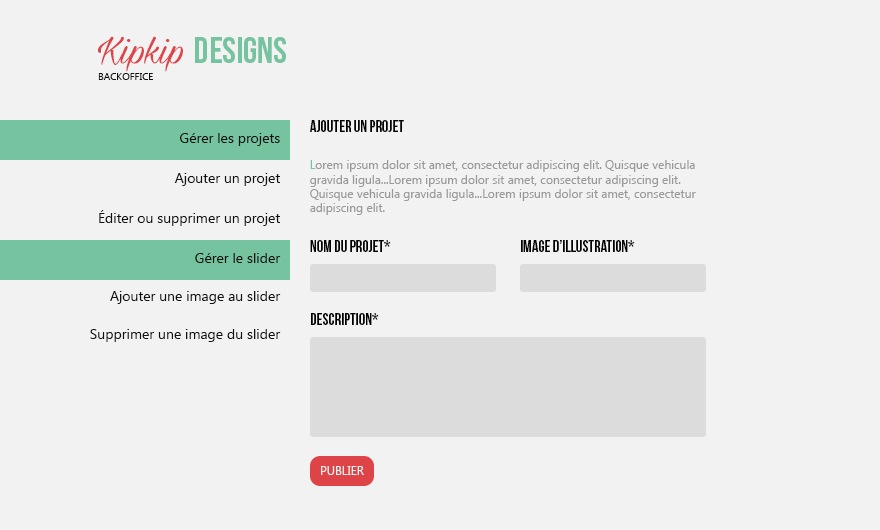
<style>
.page{position:relative;width:880px;height:530px;background:#f2f2f2}
.page>*{position:absolute;margin:0}
.t1{font:10px/17px "SegoeUI";color:#111111}
.t2{font:44px/17px "MilasianCircaPERSONAL";color:#de4347}
.t3{font:37px/17px "BebasNeue";color:#76c39f}
.t4{font:16px "BebasNeue";color:#000000}
.t5{font:14px "SegoeUI";color:#111111}
.t6{font:12px "SegoeUI";color:#999999}
.t7{font:12px "SegoeUI";color:#76c39f}
.t8{font:12px "SegoeUI";color:#f2f2f2}
</style>
<div class="page">
<p class="t1" style="left:98px;top:36px;width:188px;height:44px"><span class="t2">Kipkip </span><span class="t3">DESIGNS<br></span>BACKOFFICE</p>
<p class="t4" style="left:310px;top:120px;width:94px;height:12px">AJOUTER UN PROJET</p>
<p class="t5" style="left:180px;top:133px;width:100px;height:13px">Gérer les projets</p>
<p class="t6" style="left:310px;top:160px;width:386px;height:55px"><span class="t7">L</span>orem ipsum dolor sit amet, consectetur adipiscing elit. Quisque vehicula gravida ligula...Lorem ipsum dolor sit amet, consectetur adipiscing elit. Quisque vehicula gravida ligula...Lorem ipsum dolor sit amet, consectetur adipiscing elit.</p>
<p class="t5" style="left:174px;top:173px;width:106px;height:13px">Ajouter un projet</p>
<p class="t5" style="left:99px;top:210px;width:181px;height:16px">Éditer ou supprimer un projet</p>
<p class="t4" style="left:310px;top:240px;width:81px;height:12px">NOM DU PROJET*</p>
<p class="t4" style="left:521px;top:240px;width:114px;height:12px">IMAGE D’ILLUSTRATION*</p>
<p class="t5" style="left:195px;top:253px;width:86px;height:10px">Gérer le slider</p>
<p class="t5" style="left:110px;top:291px;width:171px;height:13px">Ajouter une image au slider</p>
<p class="t4" style="left:311px;top:313px;width:68px;height:12px">DESCRIPTION*</p>
<p class="t5" style="left:90px;top:329px;width:191px;height:13px">Supprimer une image du slider</p>
<p class="t8" style="left:321px;top:466px;width:43px;height:9px">PUBLIER</p>
</div>
